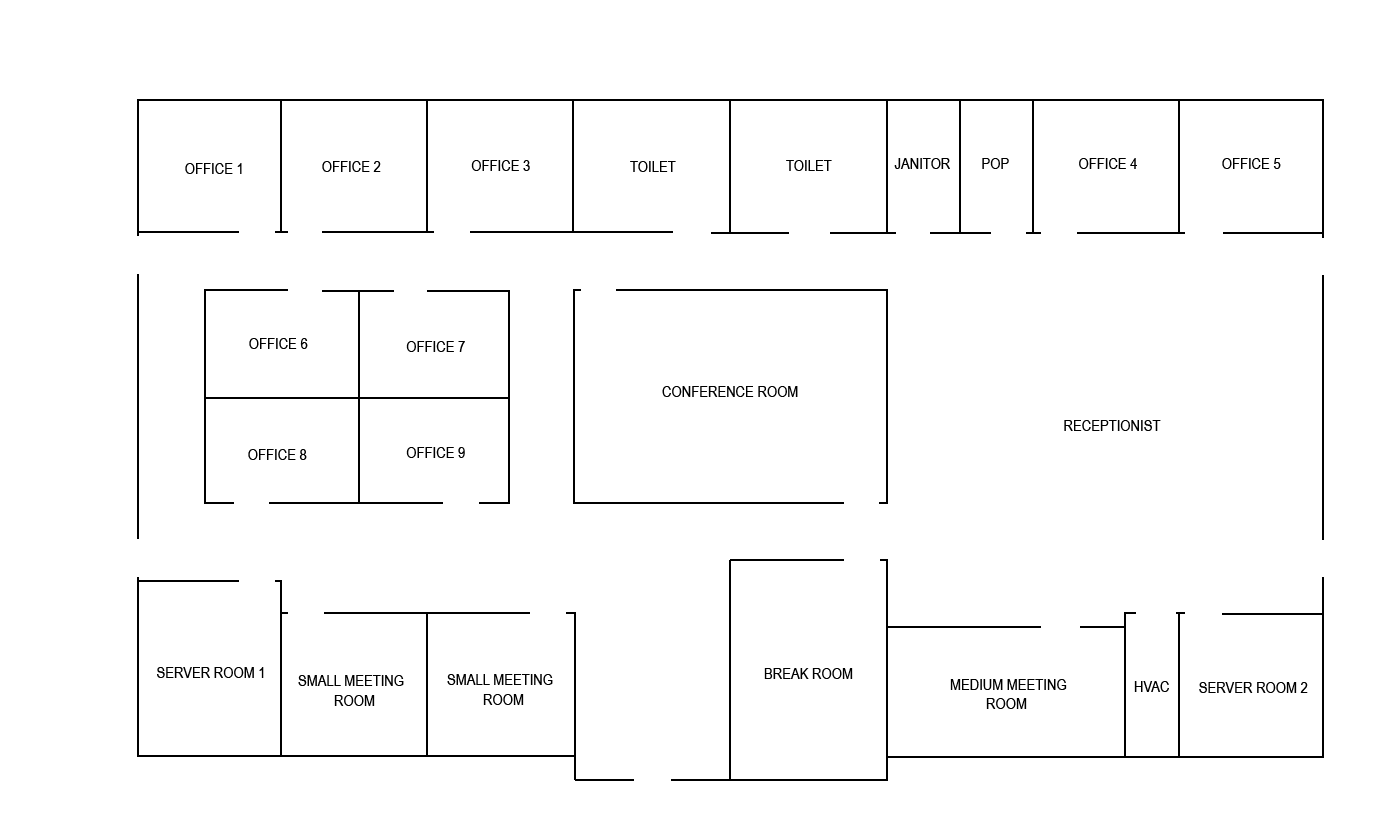
<style>
.page{position:relative;width:1373px;height:814px;background:#ffffff}
.page>*{position:absolute;margin:0}
.t1{font:16px "ArialNarrow";color:#000000}
</style>
<div class="page">
<p class="t1" style="left:322px;top:161px;width:59px;height:11px">OFFICE 2</p>
<p class="t1" style="left:471px;top:160px;width:59px;height:11px">OFFICE 3</p>
<p class="t1" style="left:630px;top:161px;width:46px;height:11px">TOILET</p>
<p class="t1" style="left:786px;top:160px;width:46px;height:11px">TOILET</p>
<p class="t1" style="left:894px;top:158px;width:56px;height:11px">JANITOR</p>
<p class="t1" style="left:982px;top:158px;width:27px;height:11px">POP</p>
<p class="t1" style="left:1079px;top:158px;width:58px;height:11px">OFFICE 4</p>
<p class="t1" style="left:1222px;top:158px;width:59px;height:11px">OFFICE 5</p>
<p class="t1" style="left:185px;top:163px;width:57px;height:11px">OFFICE 1</p>
<p class="t1" style="left:249px;top:338px;width:59px;height:11px">OFFICE 6</p>
<p class="t1" style="left:406px;top:341px;width:59px;height:11px">OFFICE 7</p>
<p class="t1" style="left:662px;top:386px;width:136px;height:11px">CONFERENCE ROOM</p>
<p class="t1" style="left:1064px;top:420px;width:97px;height:11px">RECEPTIONIST</p>
<p class="t1" style="left:248px;top:449px;width:59px;height:11px">OFFICE 8</p>
<p class="t1" style="left:406px;top:447px;width:59px;height:11px">OFFICE 9</p>
<p class="t1" style="left:157px;top:667px;width:107px;height:11px">SERVER ROOM 1</p>
<p class="t1" style="left:298px;top:675px;width:106px;height:31px">SMALL MEETING<br> ROOM</p>
<p class="t1" style="left:447px;top:674px;width:106px;height:31px">SMALL MEETING<br> ROOM</p>
<p class="t1" style="left:764px;top:668px;width:89px;height:11px">BREAK ROOM</p>
<p class="t1" style="left:950px;top:679px;width:117px;height:30px">MEDIUM MEETING<br> ROOM</p>
<p class="t1" style="left:1134px;top:681px;width:35px;height:11px">HVAC</p>
<p class="t1" style="left:1199px;top:682px;width:109px;height:11px">SERVER ROOM 2</p>
</div>
